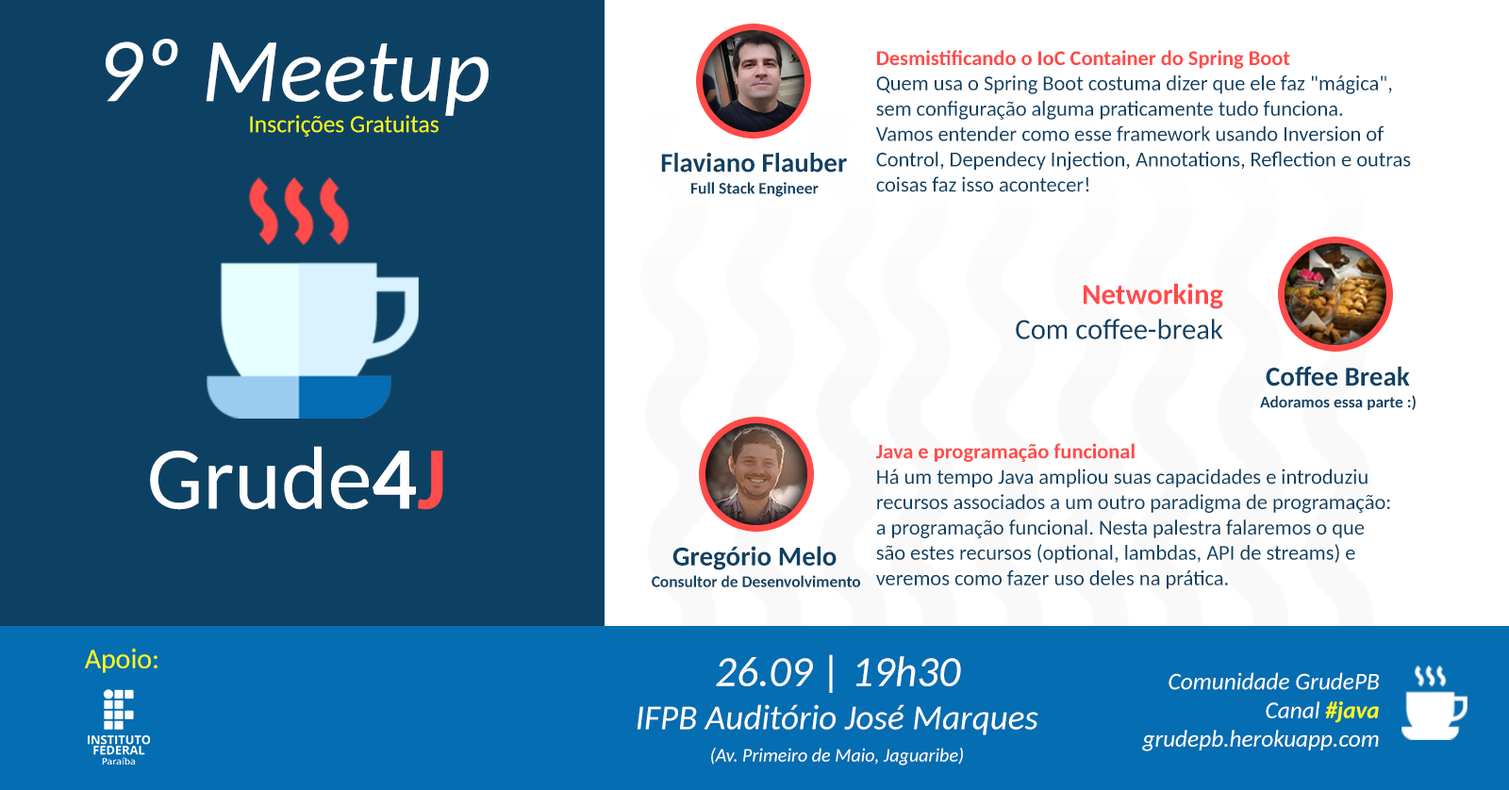
<style>
.page{position:relative;width:1509px;height:790px;background:#0d4163}
.page>*{position:absolute;margin:0}
.t1{font:91.3px "Carlito-Italic";color:#ffffff}
.t2{font:21.1px "Carlito";color:#0d4163}
.t3{font:21.1px "Carlito-Bold";color:#ff4b4a}
.t4{font:24.4px "Carlito";color:#fcfb14}
.t5{font:27.3px "Carlito-Bold";color:#0d4163}
.t6{font:16.4px "Carlito-Bold";color:#0d4163}
.t7{font:29px "Carlito";color:#0d4163}
.t8{font:29px "Carlito-Bold";color:#ff4b4a}
.t9{font:89.3px "Carlito";color:#ffffff}
.t10{font:89.3px "Carlito-Bold";color:#ffffff}
.t11{font:89.3px "Carlito-Bold";color:#ff4b4a}
.t12{font:28.2px "Carlito";color:#fcfb14}
.t13{font:42.8px "Carlito-Italic";color:#ffffff}
.t14{font:23.9px "Carlito-Italic";color:#ffffff}
.t15{font:23.9px "Carlito-BoldItalic";color:#fcfb14}
.t16{font:35px "Carlito-Italic";color:#ffffff}
.t17{font:18.9px "Carlito-Italic";color:#ffffff}
</style>
<div class="page">
<p class="t1" style="left:106px;top:39px;width:383px;height:77px">9º Meetup</p>
<p class="t2" style="left:875px;top:50px;width:536px;height:142px"><span class="t3">Desmistificando o IoC Container do Spring Boot<br></span>Quem usa o Spring Boot costuma dizer que ele faz "mágica", <br>sem configuração alguma praticamente tudo funciona. <br>Vamos entender como esse framework usando Inversion of<br>Control, Dependecy Injection, Annotations, Reflection e outras <br>coisas faz isso acontecer!</p>
<p class="t4" style="left:250px;top:115px;width:189px;height:22px">Inscrições Gratuitas</p>
<p class="t5" style="left:661px;top:153px;width:186px;height:20px">Flaviano Flauber</p>
<p class="t6" style="left:691px;top:182px;width:128px;height:15px">Full Stack Engineer</p>
<p class="t7" style="left:1016px;top:283px;width:207px;height:56px;text-align:right"><span class="t8">Networking<br></span>Com coffee-break</p>
<p class="t5" style="left:1266px;top:366px;width:144px;height:21px">Coffee Break</p>
<p class="t6" style="left:1260px;top:395px;width:156px;height:15px">Adoramos essa parte :)</p>
<p class="t9" style="left:150px;top:446px;width:293px;height:64px">Grude<span class="t10">4</span><span class="t11">J</span></p>
<p class="t2" style="left:876px;top:443px;width:514px;height:146px"><span class="t3">Java e programação funcional<br></span>Há um tempo Java ampliou suas capacidades e introduziu<br>recursos associados a um outro paradigma de programação:<br>a programação funcional. Nesta palestra falaremos o que <br>são estes recursos (optional, lambdas, API de streams) e <br>veremos como fazer uso deles na prática.</p>
<p class="t5" style="left:672px;top:546px;width:164px;height:25px">Gregório Melo</p>
<p class="t6" style="left:652px;top:575px;width:209px;height:13px">Consultor de Desenvolvimento</p>
<p class="t12" style="left:84px;top:649px;width:73px;height:24px">Apoio:</p>
<p class="t13" style="left:716px;top:654px;width:245px;height:39px">26.09 | 19h30</p>
<p class="t14" style="left:1142px;top:672px;width:237px;height:80px;text-align:right">Comunidade GrudePB<br>Canal <span class="t15">#java<br></span>grudepb.herokuapp.com</p>
<p class="t16" style="left:637px;top:704px;width:401px;height:32px">IFPB Auditório José Marques</p>
<p class="t17" style="left:711px;top:748px;width:252px;height:18px">(Av. Primeiro de Maio, Jaguaribe)</p>
</div>
